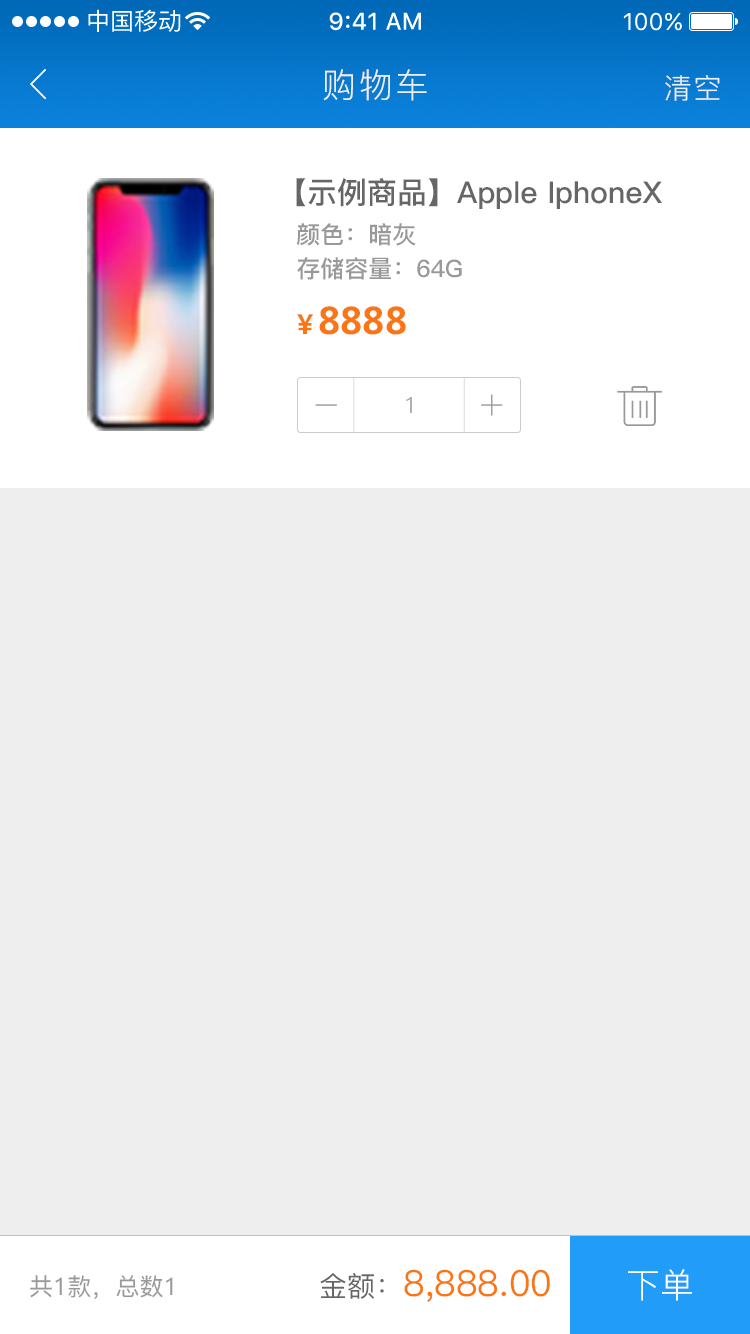
<style>
.page{position:relative;width:750px;height:1334px;background:#eeeeee}
.page>*{position:absolute;margin:0}
.t1{font:34px "PingFang-SC-Regular";letter-spacing:0.06em;color:#eeeeee}
.t2{font:28px "PingFang-SC-Regular";letter-spacing:0.06em;color:#eeeeee}
.t3{font:30px "PingFang-SC-Bold";color:#666666}
.t4{font:24px "PingFang-SC-Bold";color:#999999}
.t5{font:36px "MicrosoftYaHei-Bold";color:#fb7512}
.t6{font:26px "MicrosoftYaHei-Bold";color:#fb7512}
.t7{font:22.4px "PingFang-SC-Regular";color:#999999}
.t8{font:24px "PingFang-SC-Medium";color:#999999}
.t9{font:36px "PingFang-SC-Medium";color:#fb7512}
.t10{font:28px "PingFang-SC-Medium";color:#666666}
.t11{font:34px "PingFang-SC-Regular";color:#ffffff}
</style>
<div class="page">
<p class="t1" style="left:323px;top:69px;width:104px;height:32px">购物车</p>
<p class="t2" style="left:665px;top:75px;width:55px;height:26px">清空</p>
<p class="t3" style="left:296px;top:178px;width:366px;height:31px">【示例商品】Apple IphoneX</p>
<p class="t4" style="left:296px;top:223px;width:120px;height:23px">颜色：暗灰</p>
<p class="t4" style="left:297px;top:257px;width:165px;height:23px">存储容量：64G</p>
<p class="t5" style="left:297px;top:306px;width:109px;height:29px"><span class="t6">￥</span>8888</p>
<p class="t7" style="left:406px;top:397px;width:6px;height:16px">1</p>
<p class="t8" style="left:30px;top:1275px;width:143px;height:24px">共1款，总数1</p>
<p class="t9" style="left:320px;top:1269px;width:230px;height:33px"><span class="t10">金额：</span>8,888.00</p>
<p class="t11" style="left:628px;top:1269px;width:64px;height:32px">下单</p>
</div>
